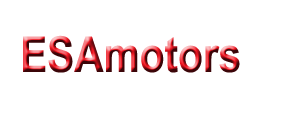
<style>
.page{position:relative;width:300px;height:115px;background:#ffffff}
.page>*{position:absolute;margin:0}
.t1{font:49.3px "Arial-BoldMT";scale:0.82 1}
</style>
<div class="page">
<p class="t1" style="left:23px;top:35px;width:217px;height:38px">ESAmotors</p>
</div>
